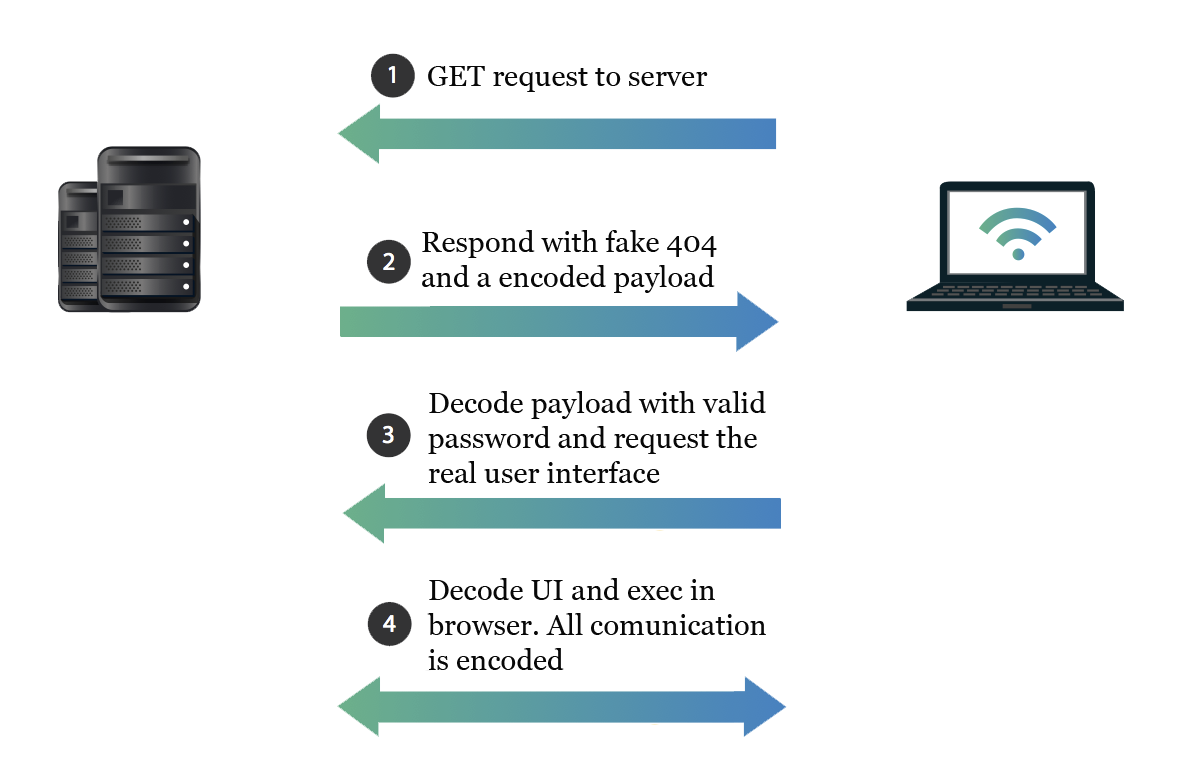
<style>
.page{position:relative;width:1181px;height:768px;background:#ffffff}
.page>*{position:absolute;margin:0}
.t1{font:29.2px "Vani";color:#080808}
</style>
<div class="page">
<p class="t1" style="left:428px;top:66px;width:280px;height:26px">GET request to server</p>
<p class="t1" style="left:422px;top:230px;width:295px;height:63px">Respond with fake 404<br>and a encoded payload</p>
<p class="t1" style="left:428px;top:391px;width:338px;height:92px">Decode payload with valid<br>password and request the<br>real user interface</p>
<p class="t1" style="left:427px;top:578px;width:339px;height:92px">Decode UI and exec in<br>browser. All comunication<br>is encoded</p>
</div>
